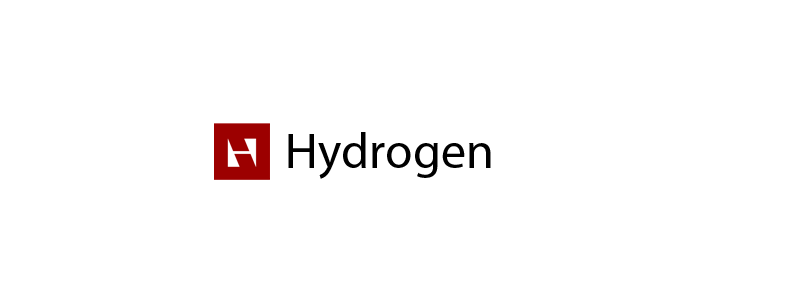
<style>
.page{position:relative;width:800px;height:300px;background:#ffffff}
.page>*{position:absolute;margin:0}
.t1{font:50px "MyriadPro-Regular";color:#000000}
</style>
<div class="page">
<p class="t1" style="left:288px;top:132px;width:203px;height:47px">Hydrogen</p>
</div>
